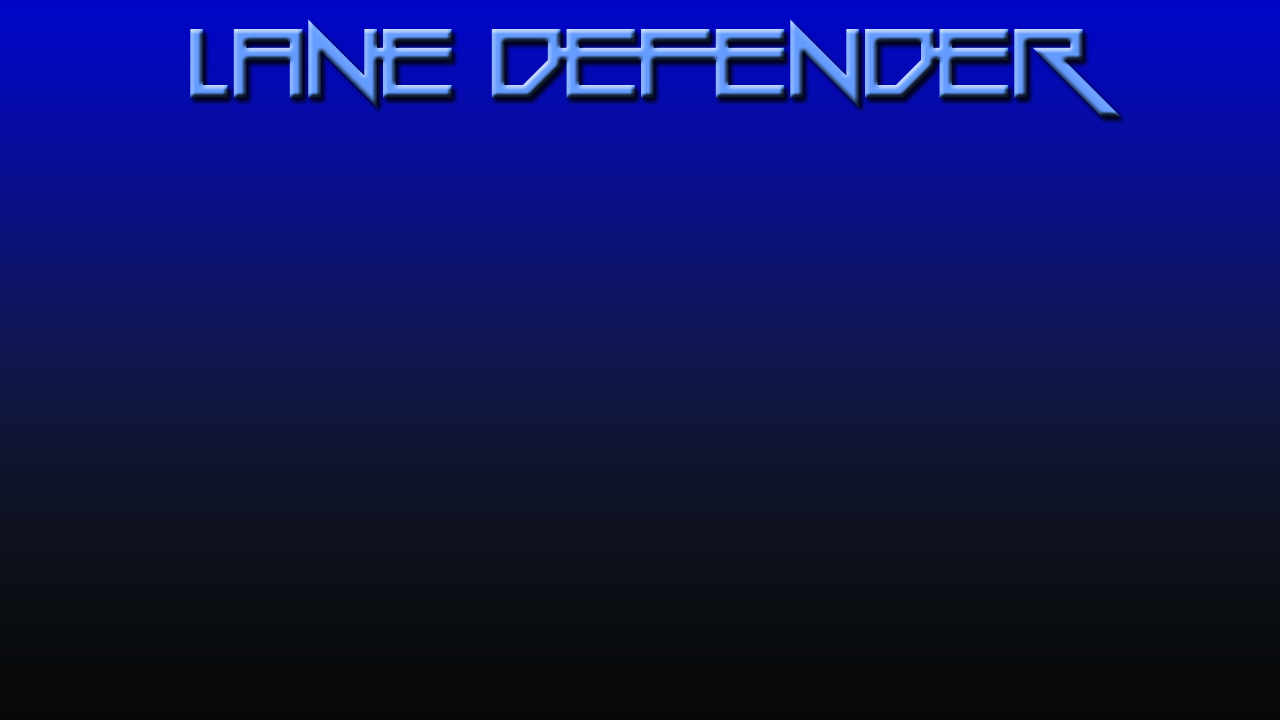
<style>
.page{position:relative;width:1280px;height:720px}
.page>*{position:absolute;margin:0}
.t1{font:199px "Gang-Wolfik"}
</style>
<div class="page">
<p class="t1" style="left:190px;top:19px;width:931px;height:98px">Lane Defender</p>
</div>
